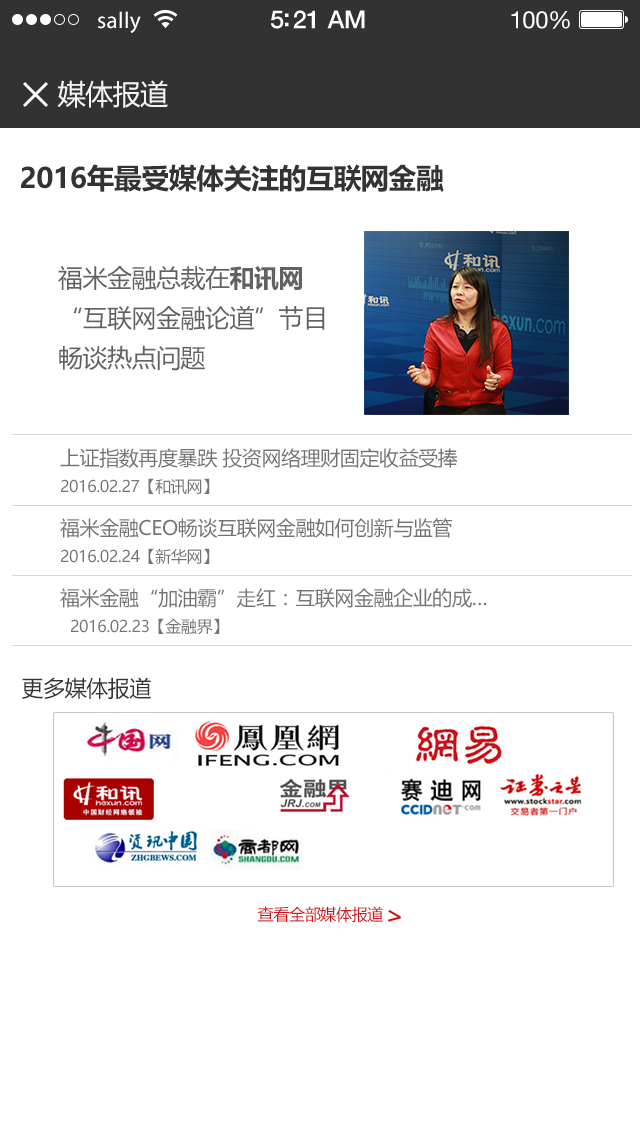
<style>
.page{position:relative;width:640px;height:1136px;background:#ffffff}
.page>*{position:absolute;margin:0}
.t1{font:23px "MyriadPro-Regular";letter-spacing:0.02em;color:#ffffff}
.t2{font:25px "HelveticaNeue-Medium";letter-spacing:-0.02em;color:#ffffff}
.t3{font:24px "HelveticaNeue";letter-spacing:-0.02em;color:#ffffff}
.t4{font:28px "MicrosoftYaHei";letter-spacing:-0.02em;color:#f3f3f3}
.t5{font:28px "MicrosoftYaHei-Bold";letter-spacing:-0.02em;color:#333333}
.t6{font:25px/40px "MicrosoftYaHei";letter-spacing:-0.02em;color:#626161}
.t7{font:25px/40px "MicrosoftYaHei-Bold";letter-spacing:-0.02em;color:#626161}
.t8{font:20px "MicrosoftYaHei";letter-spacing:-0.02em;color:#747474}
.t9{font:16px "MicrosoftYaHei";letter-spacing:-0.02em;color:#747474}
.t10{font:22px "MicrosoftYaHei";letter-spacing:-0.02em;color:#333333}
.t11{font:16px "MicrosoftYaHei";letter-spacing:-0.02em;color:#cd1419}
</style>
<div class="page">
<p class="t1" style="left:98px;top:11px;width:43px;height:22px">sally</p>
<p class="t2" style="left:271px;top:10px;width:94px;height:19px">5:21 AM</p>
<p class="t3" style="left:511px;top:11px;width:59px;height:18px">100%</p>
<p class="t4" style="left:57px;top:80px;width:111px;height:28px">媒体报道</p>
<p class="t5" style="left:21px;top:164px;width:423px;height:28px">2016年最受媒体关注的互联网金融</p>
<p class="t6" style="left:58px;top:266px;width:267px;height:105px">福米金融总裁在<span class="t7">和讯网</span>“互联网金融论道”节目畅谈热点问题</p>
<p class="t8" style="left:60px;top:448px;width:398px;height:20px">上证指数再度暴跌 投资网络理财固定收益受捧</p>
<p class="t9" style="left:61px;top:478px;width:149px;height:17px">2016.02.27【和讯网】</p>
<p class="t8" style="left:60px;top:518px;width:392px;height:20px">福米金融CEO畅谈互联网金融如何创新与监管</p>
<p class="t9" style="left:61px;top:548px;width:149px;height:16px">2016.02.24【新华网】</p>
<p class="t8" style="left:60px;top:588px;width:427px;height:20px">福米金融“加油霸”走红：互联网金融企业的成…</p>
<p class="t9" style="left:71px;top:618px;width:149px;height:17px">2016.02.23【金融界】</p>
<p class="t10" style="left:21px;top:677px;width:130px;height:22px">更多媒体报道</p>
<p class="t11" style="left:257px;top:906px;width:126px;height:17px">查看全部媒体报道</p>
</div>
